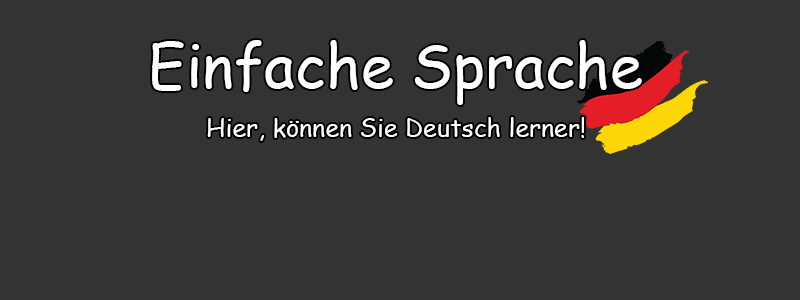
<style>
.page{position:relative;width:800px;height:300px;background:#333333}
.page>*{position:absolute;margin:0}
.t1{font:60px "ComicSansMS";color:#ffffff}
.t2{font:25px "ComicSansMS";color:#ffffff}
</style>
<div class="page">
<p class="t1" style="left:152px;top:40px;width:490px;height:65px">Einfache Sprache</p>
<p class="t2" style="left:207px;top:117px;width:377px;height:24px">Hier, können Sie Deutsch lerner!</p>
</div>
